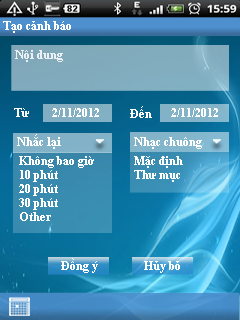
<style>
.page{position:relative;width:240px;height:320px}
.page>*{position:absolute;margin:0}
.t1{font:11.6px "TimesNewRomanPS-BoldMT";color:#ffffff}
</style>
<div class="page">
<p class="t1" style="left:3px;top:21px;width:68px;height:12px">Tạo cảnh báo</p>
<p class="t1" style="left:15px;top:50px;width:48px;height:12px;opacity:0.83">Nội dung</p>
<p class="t1" style="left:14px;top:108px;width:15px;height:9px">Từ</p>
<p class="t1" style="left:52px;top:108px;width:47px;height:9px">2/11/2012</p>
<p class="t1" style="left:130px;top:106px;width:22px;height:12px">Đến</p>
<p class="t1" style="left:171px;top:108px;width:47px;height:9px">2/11/2012</p>
<p class="t1" style="left:17px;top:134px;width:44px;height:15px">Nhắc lại</p>
<p class="t1" style="left:134px;top:137px;width:68px;height:12px">Nhạc chuông</p>
<p class="t1" style="left:19px;top:156px;width:75px;height:65px">Không bao giờ<br>  10 phút<br>  20 phút<br>  30 phút<br>  Other</p>
<p class="t1" style="left:134px;top:156px;width:49px;height:26px">Mặc định<br>Thư mục</p>
<p class="t1" style="left:61px;top:258px;width:37px;height:15px">Đồng ý</p>
<p class="t1" style="left:144px;top:261px;width:36px;height:12px">Hủy bỏ</p>
</div>
